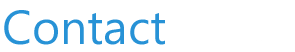
<style>
.page{position:relative;width:295px;height:52px;background:#ffffff}
.page>*{position:absolute;margin:0}
.t1{font:48px "LaoUI";color:#2792d6}
</style>
<div class="page">
<p class="t1" style="left:4px;top:10px;width:161px;height:35px">Contact</p>
</div>
